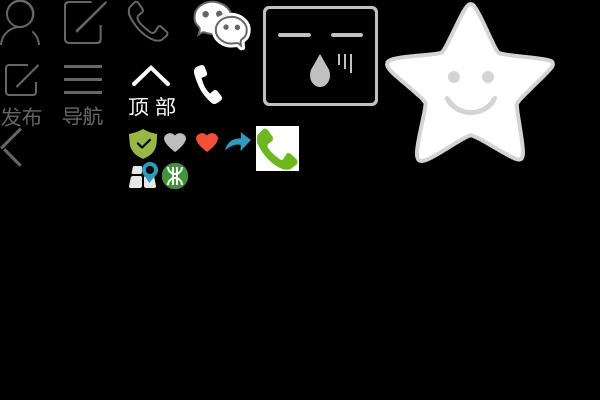
<style>
.page{position:relative;width:600px;height:400px;background:#000000}
.page>*{position:absolute;margin:0}
.t1{font:20px "STHeitiSC-Medium";color:#ffffff}
.t2{font:20px "STHeitiSC-Medium";color:#666666}
</style>
<div class="page">
<p class="t1" style="left:129px;top:97px;width:46px;height:19px">顶 部</p>
<p class="t2" style="left:1px;top:107px;width:41px;height:20px">发布</p>
<p class="t2" style="left:62px;top:106px;width:41px;height:20px">导航</p>
</div>
